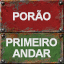
<style>
.page{position:relative;width:64px;height:64px}
.page>*{position:absolute;margin:0}
.t1{font:10.7px "Arial-BoldMT";letter-spacing:-0.04em;color:#e8e8e8;text-transform:uppercase;font-weight:bold}
.t2{font:10.7px/10.7px "Arial-BoldMT";letter-spacing:-0.04em;color:#e8e8e8;text-transform:uppercase;font-weight:bold}
</style>
<div class="page">
<p class="t1" style="left:13px;top:10px;width:38px;height:11px">PORÃO</p>
<p class="t2" style="left:6px;top:38px;width:51px;height:20px;text-align:center">primeiro<br>andar</p>
</div>
